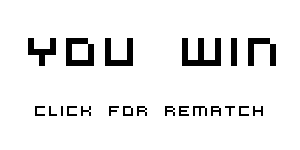
<style>
.page{position:relative;width:300px;height:150px;background:#ffffff}
.page>*{position:absolute;margin:0}
.t1{font:44px "VirtualDJ";color:#000000}
.t2{font:16px "VirtualDJ";color:#000000}
</style>
<div class="page">
<p class="t1" style="left:28px;top:38px;width:248px;height:28px">YOU WIN</p>
<p class="t2" style="left:35px;top:106px;width:228px;height:10px">Click for rematch</p>
</div>
